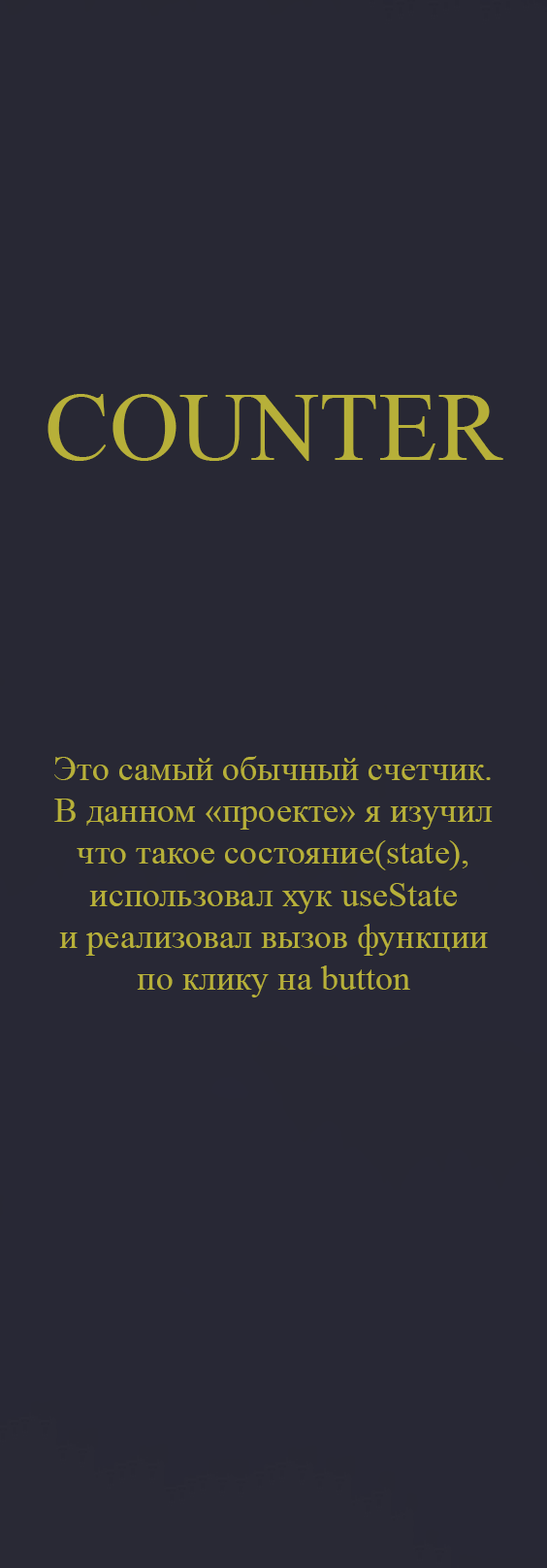
<style>
.page{position:relative;width:547px;height:1568px;background:#282834}
.page>*{position:absolute;margin:0}
.t1{font:97px "TimesNewRomanPSMT";color:#b7b039}
.t2{font:34.9px "TimesNewRomanPSMT";color:#b7b039}
</style>
<div class="page">
<p class="t1" style="left:48px;top:394px;width:456px;height:67px">COUNTER</p>
<p class="t2" style="left:54px;top:756px;width:439px;height:241px;text-align:center">Это самый обычный счетчик.<br>В данном «проекте» я изучил что такое состояние(state),<br>использовал хук useState <br>и реализовал вызов функции по клику на button</p>
</div>
